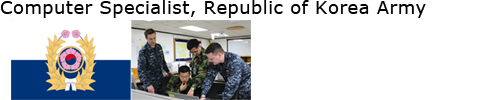
<style>
.page{position:relative;width:500px;height:100px;background:#ffffff}
.page>*{position:absolute;margin:0}
.t1{font:18px "Verdana";letter-spacing:0.025em;color:#010101}
</style>
<div class="page">
<p class="t1" style="left:0px;top:0px;width:426px;height:18px">Computer Specialist, Republic of Korea Army</p>
</div>
